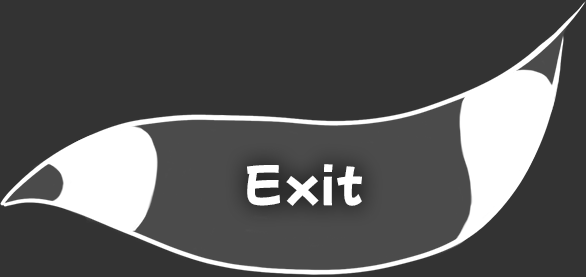
<style>
.page{position:relative;width:586px;height:277px;background:#333333}
.page>*{position:absolute;margin:0}
.t1{font:46.3px "MochiyPopPOne-Regular";letter-spacing:0.04em;color:#ffffff}
</style>
<div class="page">
<p class="t1" style="left:247px;top:164px;width:115px;height:42px">Exit</p>
</div>
